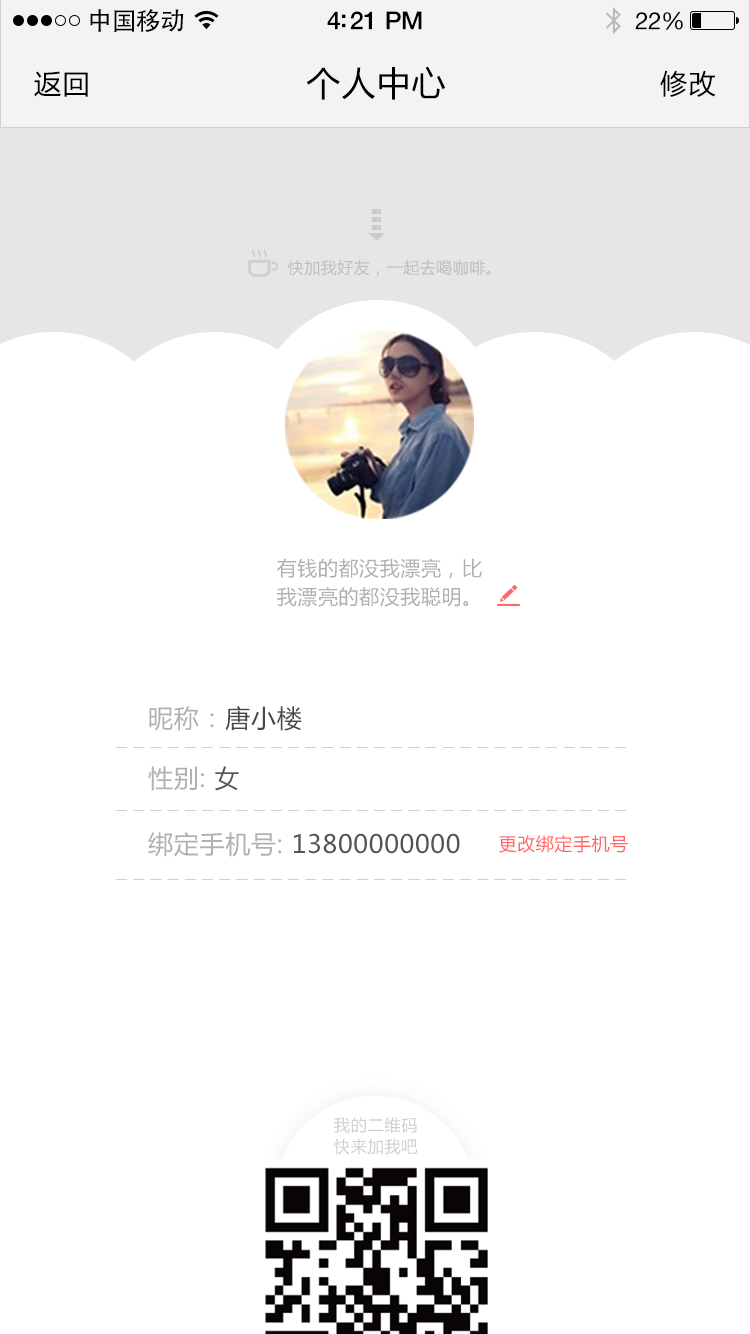
<style>
.page{position:relative;width:750px;height:1334px;background:#ffffff}
.page>*{position:absolute;margin:0}
.t1{font:25px "AdobeHeitiStd-Regular";letter-spacing:-0.025em;color:#000000}
.t2{font:25px "HelveticaNeue-Medium";letter-spacing:-0.02em;color:#000000}
.t3{font:24px "HelveticaNeue";letter-spacing:-0.02em;color:#000000}
.t4{font:27px "MicrosoftYaHei";letter-spacing:0.05em;color:#000000}
.t5{font:34px "MicrosoftYaHei";letter-spacing:0.03em;color:#000000}
.t6{font:16px "MicrosoftYaHei";letter-spacing:0.03em;color:#bfbfbf}
.t7{font:20px/70px "MicrosoftYaHei";letter-spacing:0.03em;color:#b0b0b0}
.t8{font:25px "MicrosoftYaHei";letter-spacing:0.03em;color:#b0b0b0}
.t9{font:25px "MicrosoftYaHei";letter-spacing:0.03em;color:#484848}
.t10{font:25px "MicrosoftYaHei";letter-spacing:0.03em;color:#555555}
.t11{font:18px "MicrosoftYaHei";letter-spacing:0.03em;color:#ff6666}
.t12{font:16.4px "MicrosoftYaHei";letter-spacing:0.03em;color:#d0d0d0}
</style>
<div class="page">
<p class="t1" style="left:90px;top:9px;width:94px;height:23px">中国移动</p>
<p class="t2" style="left:327px;top:11px;width:95px;height:19px">4:21 PM</p>
<p class="t3" style="left:635px;top:12px;width:48px;height:18px">22%</p>
<p class="t4" style="left:34px;top:71px;width:54px;height:26px">返回</p>
<p class="t5" style="left:306px;top:66px;width:140px;height:34px">个人中心</p>
<p class="t4" style="left:660px;top:70px;width:56px;height:27px">修改</p>
<p class="t6" style="left:288px;top:259px;width:203px;height:17px">快加我好友，一起去喝咖啡。</p>
<p class="t7" style="left:277px;top:558px;width:205px;height:49px">有钱的都没我漂亮，比<br>我漂亮的都没我聪明。</p>
<p class="t8" style="left:149px;top:706px;width:153px;height:25px">昵称：<span class="t9">唐小楼</span></p>
<p class="t8" style="left:148px;top:766px;width:91px;height:25px">性别: <span class="t10">女</span></p>
<p class="t10" style="left:148px;top:832px;width:312px;height:25px"><span class="t8">绑定手机号: </span>13800000000</p>
<p class="t11" style="left:499px;top:835px;width:129px;height:18px">更改绑定手机号</p>
<p class="t12" style="left:334px;top:1117px;width:83px;height:16px">我的二维码</p>
<p class="t12" style="left:334px;top:1138px;width:84px;height:17px">快来加我吧</p>
</div>
